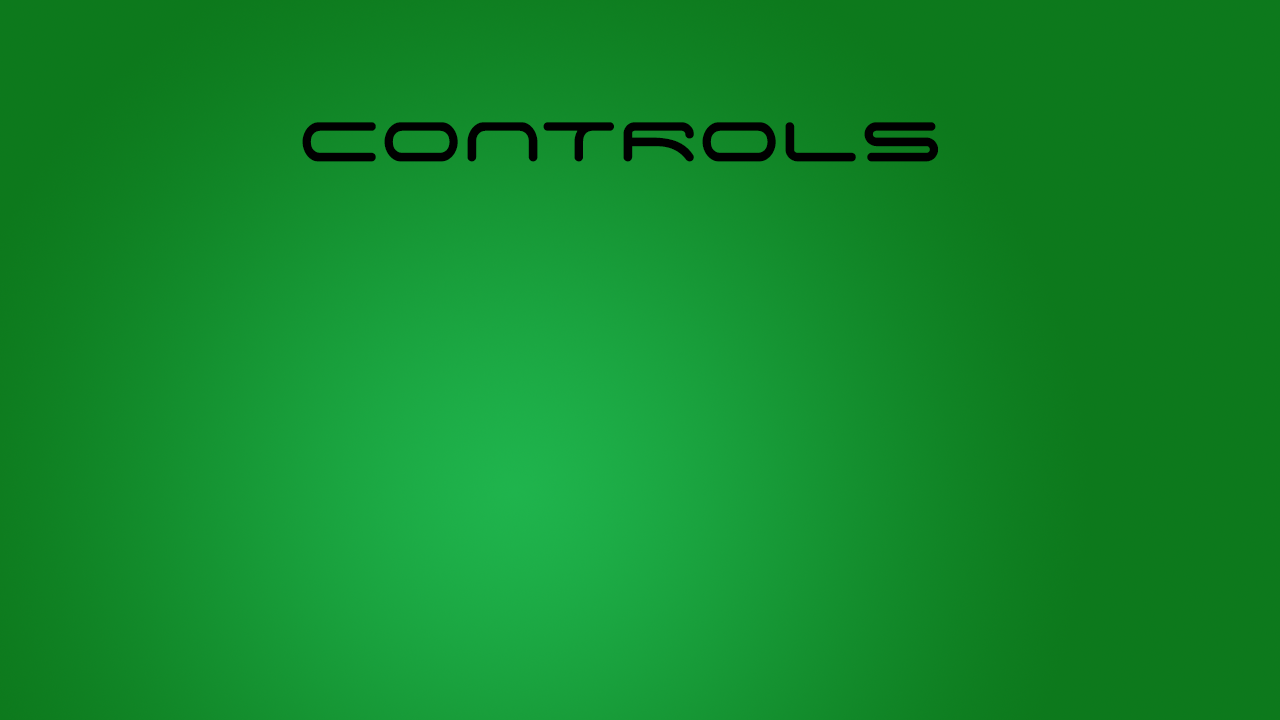
<style>
.page{position:relative;width:1280px;height:720px}
.page>*{position:absolute;margin:0}
.t1{font:90px "SpaceAge";color:#000000}
</style>
<div class="page">
<p class="t1" style="left:302px;top:122px;width:636px;height:40px">CONTROLS</p>
</div>
